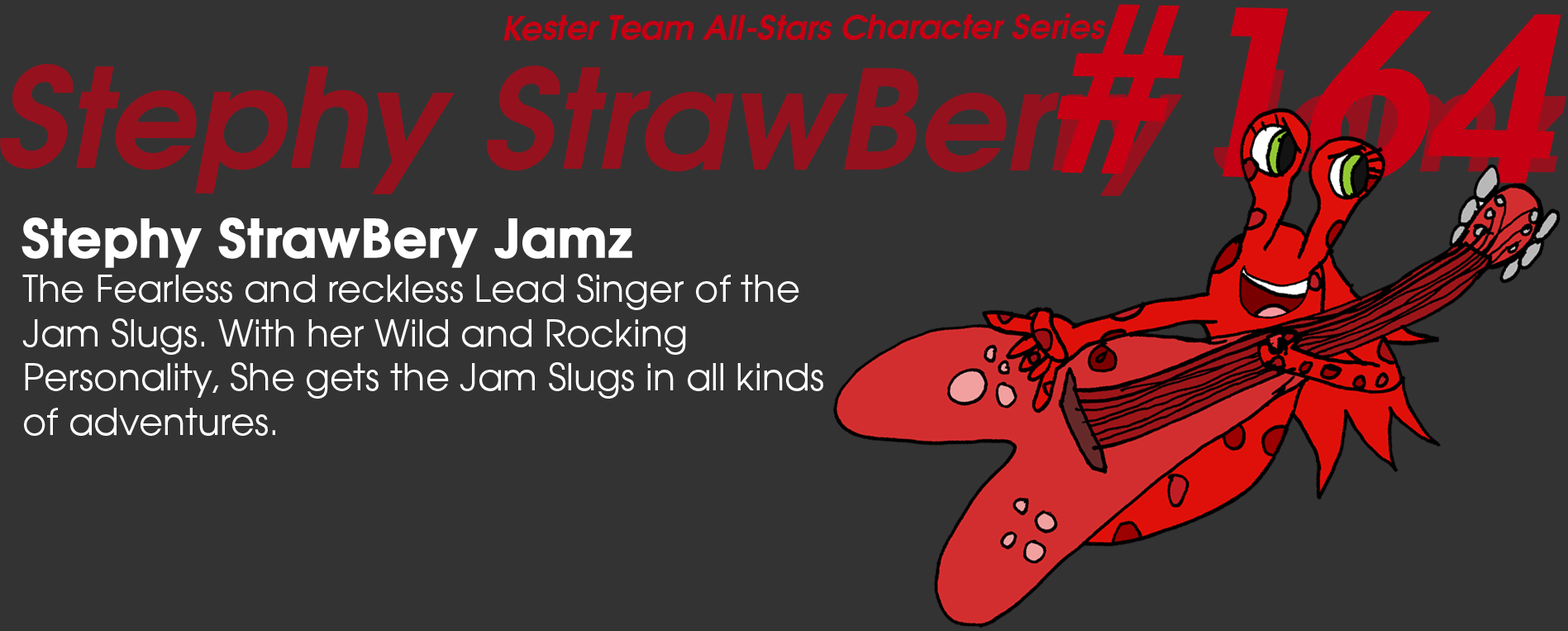
<style>
.page{position:relative;width:1568px;height:631px;background:#333333}
.page>*{position:absolute;margin:0}
.t1{font:229px "TeXGyreAdventor-BoldItalic";color:#c70013}
.t2{font:33.1px "TeXGyreAdventor-BoldItalic";color:#c70013}
.t3{font:137.2px "TeXGyreAdventor-BoldItalic";color:#96111e}
.t4{font:37px "TeXGyreAdventor-Regular";color:#ffffff}
.t5{font:52.4px/61.7px "TeXGyreAdventor-Bold";color:#ffffff;font-weight:bold}
</style>
<div class="page">
<p class="t1" style="left:1056px;top:4px;width:505px;height:179px;rotate:1deg">#164</p>
<p class="t2" style="left:503px;top:13px;width:602px;height:28px">Kester Team All-Stars Character Series</p>
<p class="t3" style="left:0px;top:64px;width:1566px;height:132px">Stephy StrawBerry Jamz</p>
<p class="t4" style="left:21px;top:217px;width:802px;height:219px"><span class="t5">Stephy StrawBery Jamz<br></span>The Fearless and reckless Lead Singer of the Jam Slugs. With her Wild and Rocking Personality, She gets the Jam Slugs in all kinds of adventures.</p>
</div>
